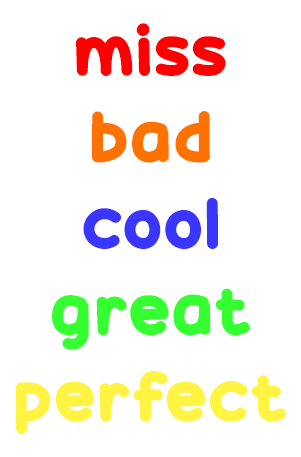
<style>
.page{position:relative;width:301px;height:457px;background:#ffffff}
.page>*{position:absolute;margin:0}
.t1{font:72px "CandyBeans";letter-spacing:0.025em;color:#fff441}
.t2{font:72px "CandyBeans";letter-spacing:0.025em;color:#ff0000}
.t3{font:72px "CandyBeans";letter-spacing:0.025em;color:#ff7200}
.t4{font:72px "CandyBeans";letter-spacing:0.025em;color:#3a35ff}
.t5{font:72px "CandyBeans";letter-spacing:0.025em;color:#35ff30}
</style>
<div class="page">
<p class="t1" style="left:15px;top:23px;width:271px;height:411px;text-align:center"><span class="t2">miss<br></span><span class="t3">bad<br></span><span class="t4">cool<br></span><span class="t5">great<br></span>perfect</p>
</div>
